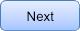
<style>
.page{position:relative;width:80px;height:31px}
.page>*{position:absolute;margin:0}
.t1{font:13.3px "ArialMT";color:#000000}
</style>
<div class="page">
<p class="t1" style="left:27px;top:11px;width:27px;height:10px">Next</p>
</div>
